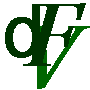
<style>
.page{position:relative;width:90px;height:90px;background:#ffffff}
.page>*{position:absolute;margin:0}
.t1{font:72px "Helvetica";color:#003300;font-weight:bold}
.t2{font:96px "KeplerStd-ItDisp";color:#003300;font-weight:bold}
.t3{font:96px "KeplerStd-ItDisp";color:#006600;font-weight:bold}
</style>
<div class="page">
<p class="t1" style="left:5px;top:4px;width:35px;height:54px">d</p>
<p class="t2" style="left:23px;top:3px;width:63px;height:63px">F</p>
<p class="t3" style="left:29px;top:26px;width:61px;height:63px">V</p>
</div>
